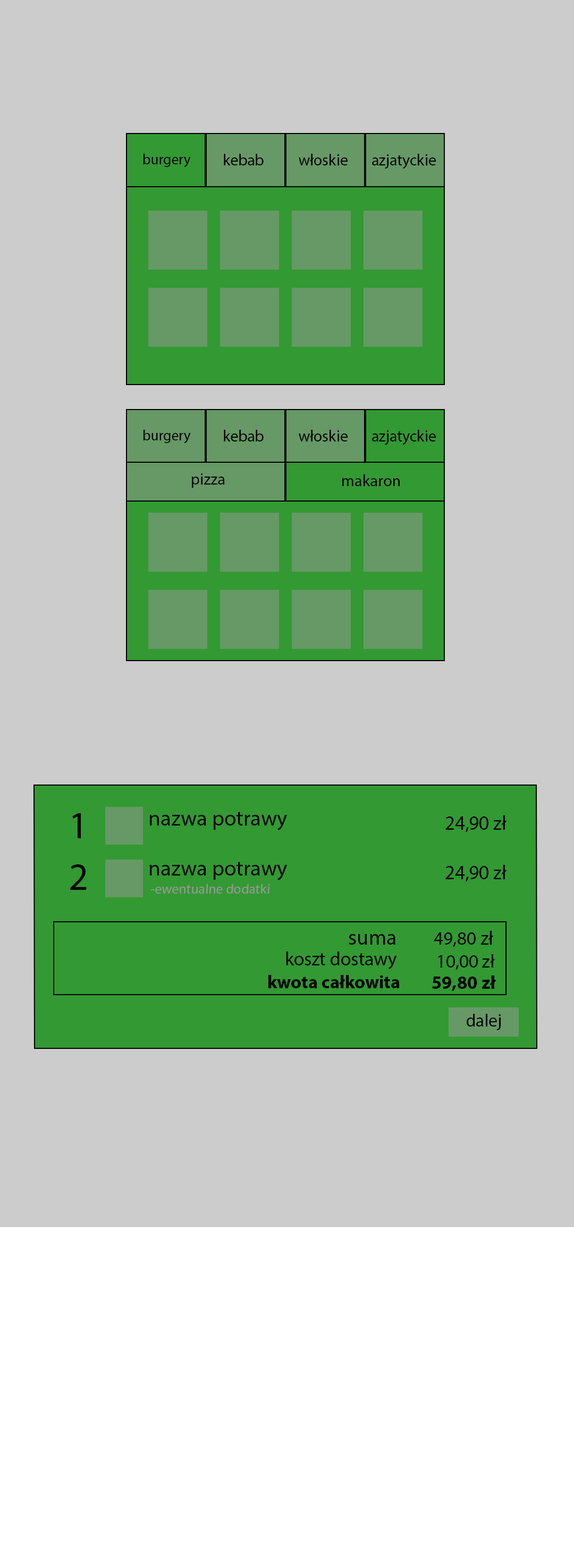
<style>
.page{position:relative;width:574px;height:1568px;background:#cccccc}
.page>*{position:absolute;margin:0}
.t1{font:14.5px "MyriadPro-Regular";color:#000000}
.t2{font:16px "MyriadPro-Regular";color:#000000}
.t3{font:16.2px "MyriadPro-Regular";color:#000000}
.t4{font:38.3px "MyriadPro-Regular";color:#000000}
.t5{font:21.8px "MyriadPro-Regular";color:#000000}
.t6{font:19.8px "MyriadPro-Regular";color:#000000}
.t7{font:13.6px "MyriadPro-Regular";color:#999999}
.t8{font:21.4px "MyriadPro-Regular";color:#000000}
.t9{font:18.9px "MyriadPro-Regular";color:#000000}
.t10{font:19px "MyriadPro-Regular";color:#000000}
.t11{font:18.5px "MyriadPro-Regular";color:#000000}
.t12{font:18.4px "MyriadPro-Bold";color:#000000}
.t13{font:18.6px "MyriadPro-Bold";color:#000000}
.t14{font:17.7px "MyriadPro-Regular";color:#000000}
</style>
<div class="page">
<p class="t1" style="left:144px;top:154px;width:47px;height:14px">burgery</p>
<p class="t2" style="left:224px;top:154px;width:40px;height:11px">kebab</p>
<p class="t2" style="left:299px;top:154px;width:49px;height:11px">włoskie</p>
<p class="t2" style="left:372px;top:154px;width:64px;height:15px">azjatyckie</p>
<p class="t1" style="left:144px;top:430px;width:47px;height:14px">burgery</p>
<p class="t2" style="left:224px;top:430px;width:40px;height:11px">kebab</p>
<p class="t2" style="left:299px;top:430px;width:49px;height:11px">włoskie</p>
<p class="t2" style="left:372px;top:430px;width:64px;height:15px">azjatyckie</p>
<p class="t3" style="left:192px;top:473px;width:33px;height:15px">pizza</p>
<p class="t3" style="left:343px;top:474px;width:57px;height:12px">makaron</p>
<p class="t4" style="left:72px;top:813px;width:9px;height:25px">1</p>
<p class="t5" style="left:149px;top:812px;width:138px;height:18px">nazwa potrawy</p>
<p class="t6" style="left:446px;top:815px;width:61px;height:17px">24,90 zł</p>
<p class="t4" style="left:70px;top:864px;width:17px;height:26px">2</p>
<p class="t5" style="left:149px;top:862px;width:138px;height:18px">nazwa potrawy</p>
<p class="t6" style="left:446px;top:865px;width:61px;height:17px">24,90 zł</p>
<p class="t7" style="left:151px;top:884px;width:119px;height:10px">-ewentualne dodatki</p>
<p class="t8" style="left:349px;top:934px;width:47px;height:11px">suma</p>
<p class="t9" style="left:434px;top:931px;width:60px;height:16px">49,80 zł</p>
<p class="t10" style="left:286px;top:952px;width:111px;height:18px">koszt dostawy</p>
<p class="t11" style="left:438px;top:954px;width:57px;height:16px">10,00 zł</p>
<p class="t12" style="left:269px;top:975px;width:131px;height:13px">kwota całkowita</p>
<p class="t13" style="left:432px;top:975px;width:64px;height:16px">59,80 zł</p>
<p class="t14" style="left:467px;top:1014px;width:34px;height:16px">dalej</p>
</div>
